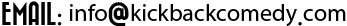
<style>
.page{position:relative;width:347px;height:26px;background:#ffffff}
.page>*{position:absolute;margin:0}
.t1{font:24px "MyriadPro-Regular";color:#000000}
.t2{font:24px "Bazar";color:#000000}
</style>
<div class="page">
<p class="t1" style="left:2px;top:1px;width:344px;height:25px"><span class="t2">EMAIL: </span>info<span class="t2">@</span>kickbackcomedy<span class="t2">.</span>com</p>
</div>
